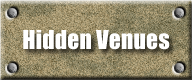
<style>
.page{position:relative;width:192px;height:80px}
.page>*{position:absolute;margin:0}
.t1{font:24px "Impact";color:#ffffff}
</style>
<div class="page">
<p class="t1" style="left:23px;top:30px;width:147px;height:20px">Hidden Venues</p>
</div>
